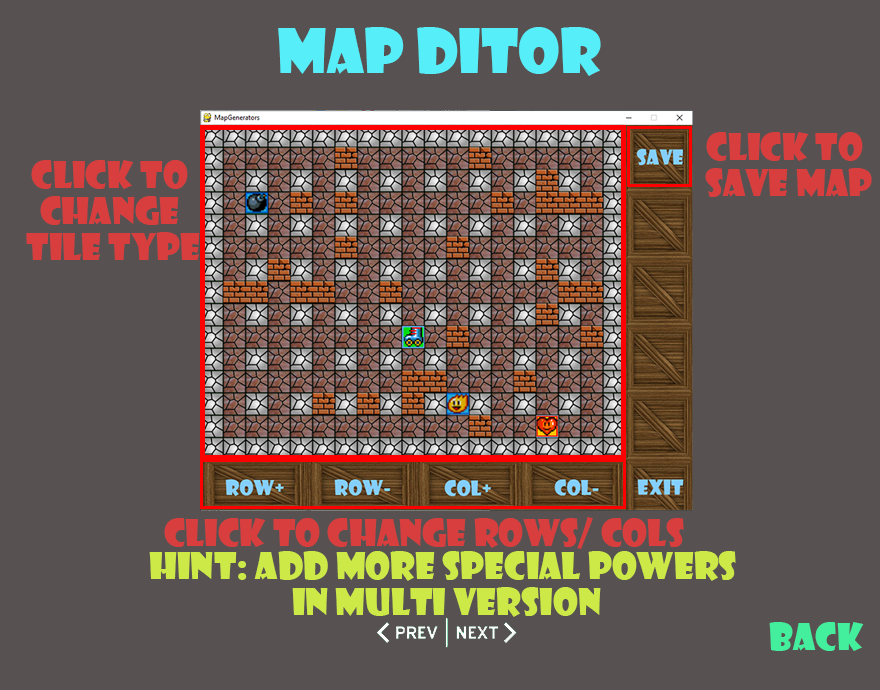
<style>
.page{position:relative;width:880px;height:690px;background:#575151}
.page>*{position:absolute;margin:0}
.t1{font:60px "ShowcardGothic-Reg";color:#56eff9}
.t2{font:36px/36px "ShowcardGothic-Reg";color:#d93e3e}
.t3{font:36px "ShowcardGothic-Reg";color:#d93e3e}
.t4{font:36px/36px "ShowcardGothic-Reg";color:#cde948}
.t5{font:36px "ShowcardGothic-Reg";color:#43ee9c}
</style>
<div class="page">
<p class="t1" style="left:278px;top:27px;width:323px;height:49px">Map Ditor</p>
<p class="t2" style="left:705px;top:132px;width:167px;height:65px;text-align:center">Click to <br>Save map</p>
<p class="t2" style="left:26px;top:160px;width:174px;height:100px;text-align:center">Click to <br>Change <br>Tile type</p>
<p class="t3" style="left:164px;top:517px;width:520px;height:32px">Click to change rows/ cols</p>
<p class="t4" style="left:149px;top:551px;width:587px;height:66px;text-align:center">Hint: add more special powers <br>in multi version</p>
<p class="t5" style="left:769px;top:622px;width:95px;height:29px">back</p>
</div>
